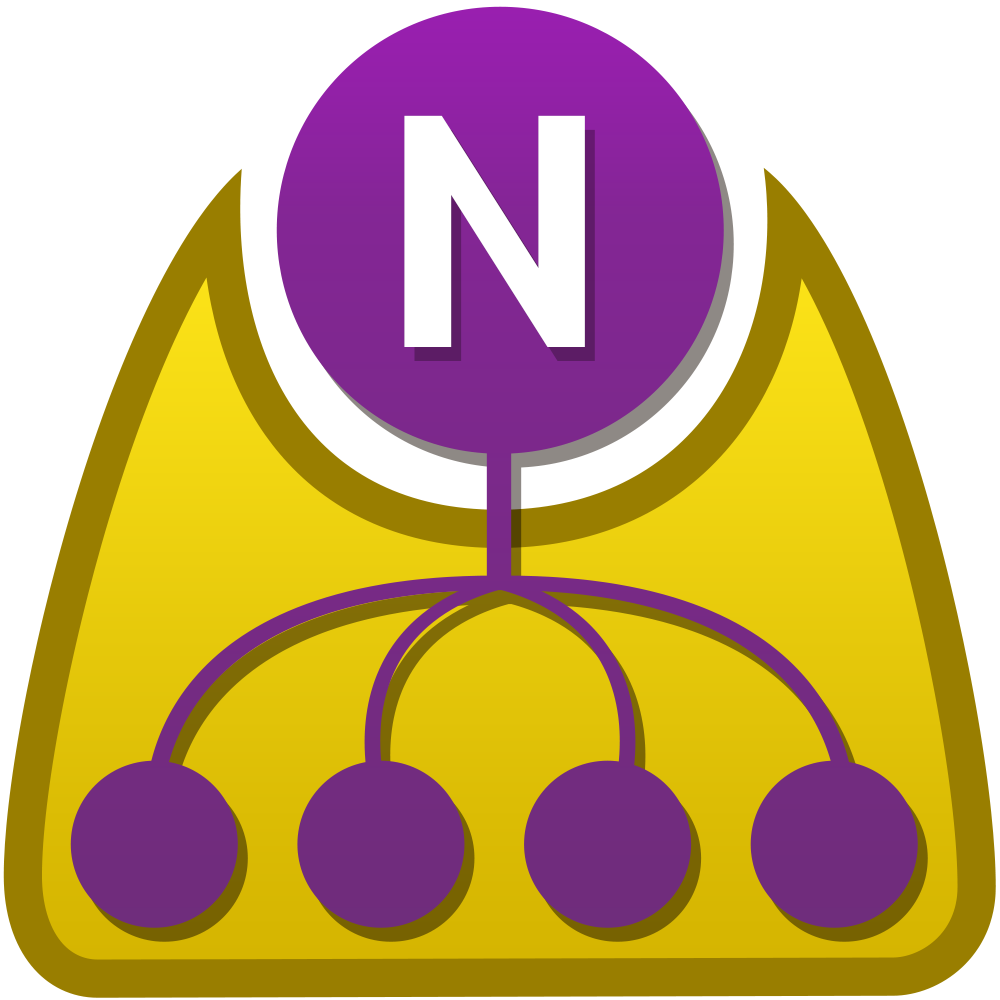
<style>
.page{position:relative;width:1000px;height:1000px;background:#ffffff}
.page>*{position:absolute;margin:0}
.t1{font:312.3px "Exo-Bold";color:#ffffff}
</style>
<div class="page">
<p class="t1" style="left:404px;top:115px;width:181px;height:232px">N</p>
</div>
